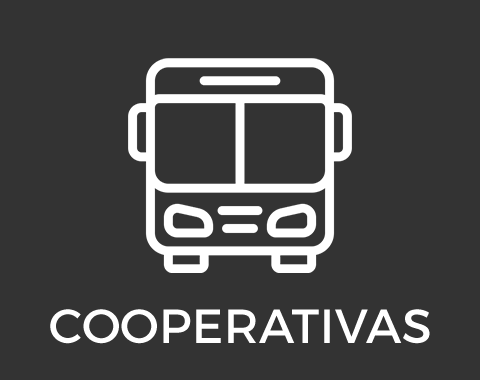
<style>
.page{position:relative;width:480px;height:380px;background:#333333}
.page>*{position:absolute;margin:0}
.t1{font:48px "Montserrat-Regular";letter-spacing:0.01em;color:#ffffff}
</style>
<div class="page">
<p class="t1" style="left:50px;top:309px;width:380px;height:35px">COOPERATIVAS</p>
</div>
